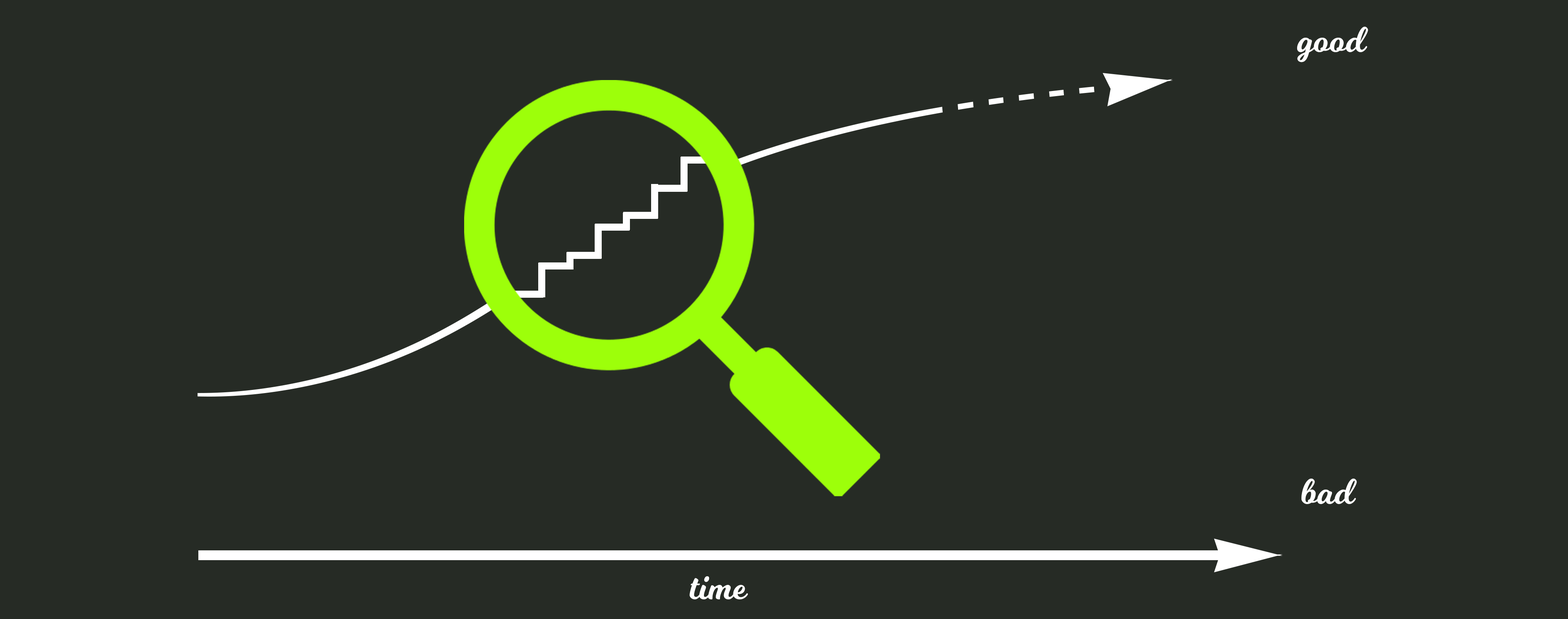
<style>
.page{position:relative;width:1568px;height:619px;background:#262b25}
.page>*{position:absolute;margin:0}
.t1{font:36.1px "Milkshake";color:#ffffff}
</style>
<div class="page">
<p class="t1" style="left:1297px;top:27px;width:71px;height:35px">good</p>
<p class="t1" style="left:1301px;top:478px;width:56px;height:26px">bad</p>
<p class="t1" style="left:690px;top:576px;width:58px;height:23px">time</p>
</div>
